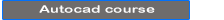
<style>
.page{position:relative;width:224px;height:20px;background:#6e6c6c}
.page>*{position:absolute;margin:0}
.t1{font:10.2px "ArialRoundedMTBold";color:#fcfcfc;scale:1.47 1}
</style>
<div class="page">
<p class="t1" style="left:39px;top:5px;width:116px;height:8px">Autocad course</p>
</div>
